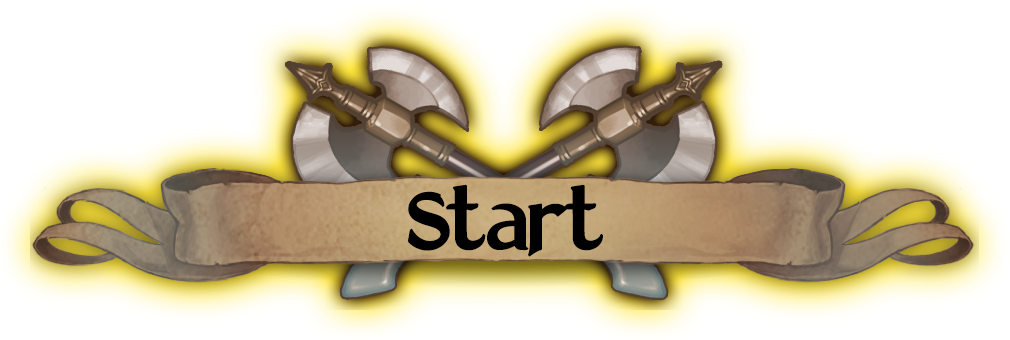
<style>
.page{position:relative;width:1010px;height:340px;background:#ffffff}
.page>*{position:absolute;margin:0}
.t1{font:85px "DragonFire";color:#000000;font-weight:bold}
</style>
<div class="page">
<p class="t1" style="left:408px;top:184px;width:195px;height:73px">Start</p>
</div>
